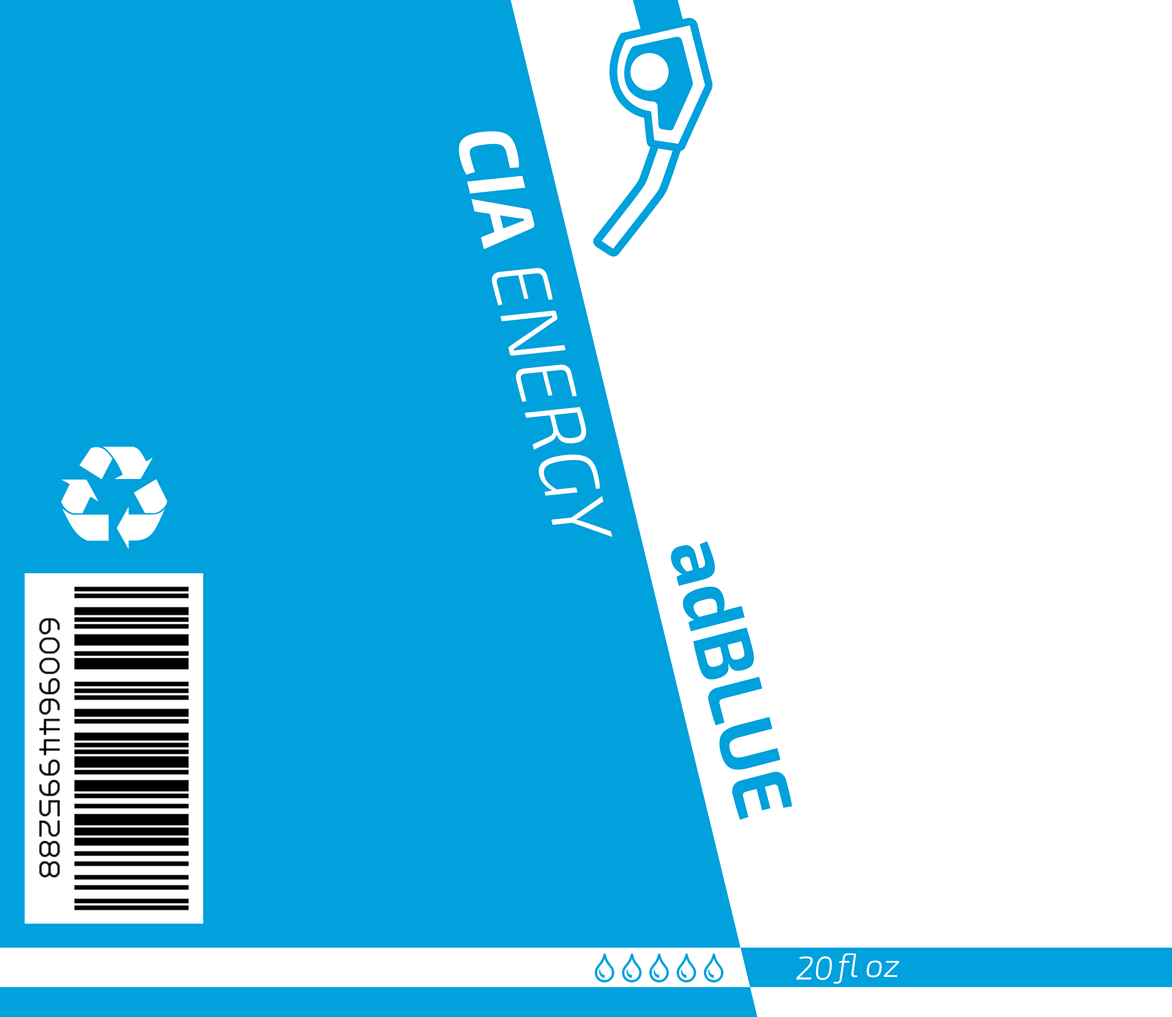
<style>
.page{position:relative;width:1172px;height:1017px;background:#ffffff}
.page>*{position:absolute;margin:0}
.t1{font:79.6px "Exo2-LightItalic";color:#ffffff}
.t2{font:79.6px "Exo2-BoldItalic";color:#ffffff}
.t3{font:79.6px "Exo2-Bold";color:#00a1dc}
.t4{font:32.9px "Exo2-LightItalic";color:#ffffff}
</style>
<div class="page">
<p class="t1" style="left:459px;top:131px;width:153px;height:406px;rotate:76deg"><span class="t2">CIA</span> ENERGY</p>
<p class="t3" style="left:671px;top:541px;width:121px;height:279px;rotate:75deg">adBLUE</p>
<p class="t4" style="left:833px;top:954px;width:66px;height:30px">fl oz</p>
<p class="t4" style="left:796px;top:957px;width:36px;height:24px">20</p>
</div>
